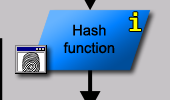
<style>
.page{position:relative;width:170px;height:100px;background:#c6c3c6}
.page>*{position:absolute;margin:0}
.t1{font:24px "Fixedsys";color:#ffff00}
.t2{font:14.7px "ArialMT";color:#000000}
</style>
<div class="page">
<p class="t1" style="left:129px;top:12px;width:12px;height:19px">i</p>
<p class="t2" style="left:63px;top:24px;width:52px;height:30px;text-align:center">Hash<br>function</p>
</div>
